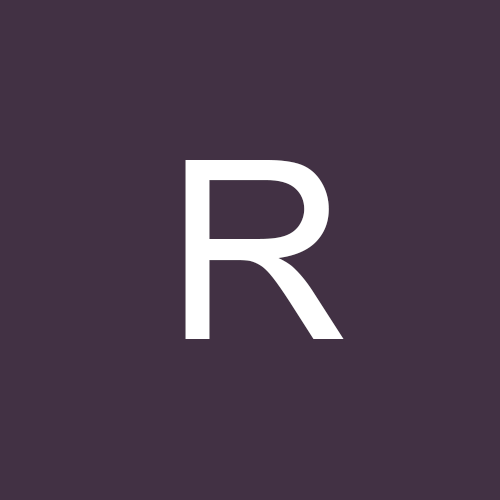
<style>
.page{position:relative;width:500px;height:500px;background:#423144}
.page>*{position:absolute;margin:0}
.t1{font:250px "ArialMT";color:#ffffff}
</style>
<div class="page">
<p class="t1" style="left:185px;top:160px;width:159px;height:179px">R</p>
</div>
